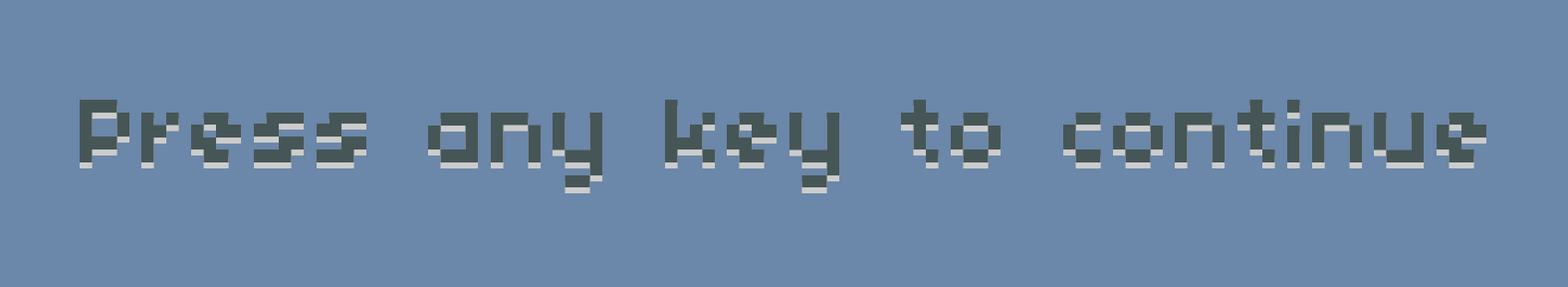
<style>
.page{position:relative;width:1568px;height:287px;background:#6b87a9}
.page>*{position:absolute;margin:0}
.t1{font:99.6px "04b03";color:#465657}
</style>
<div class="page">
<p class="t1" style="left:80px;top:100px;width:1406px;height:87px">Press any key to continue</p>
<p class="t1" style="left:80px;top:106px;width:1406px;height:87px">Press any key to continue</p>
</div>
